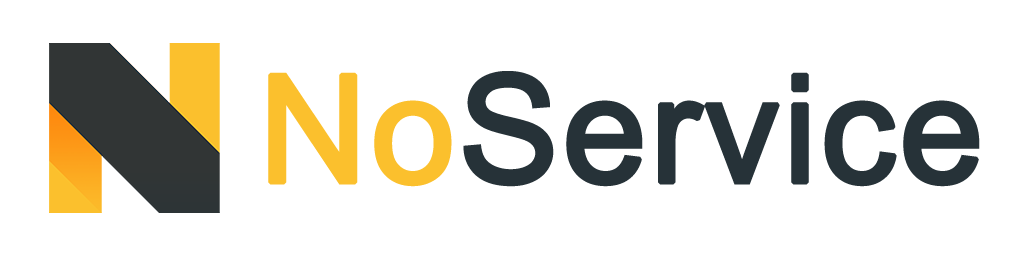
<style>
.page{position:relative;width:1024px;height:256px;background:#ffffff}
.page>*{position:absolute;margin:0}
.t1{font:150px "ArialMT";color:#263238;font-weight:bold}
.t2{font:150px "ArialMT";color:#fbc02d;font-weight:bold}
</style>
<div class="page">
<p class="t1" style="left:268px;top:71px;width:712px;height:116px"><span class="t2">No</span>Service</p>
</div>
